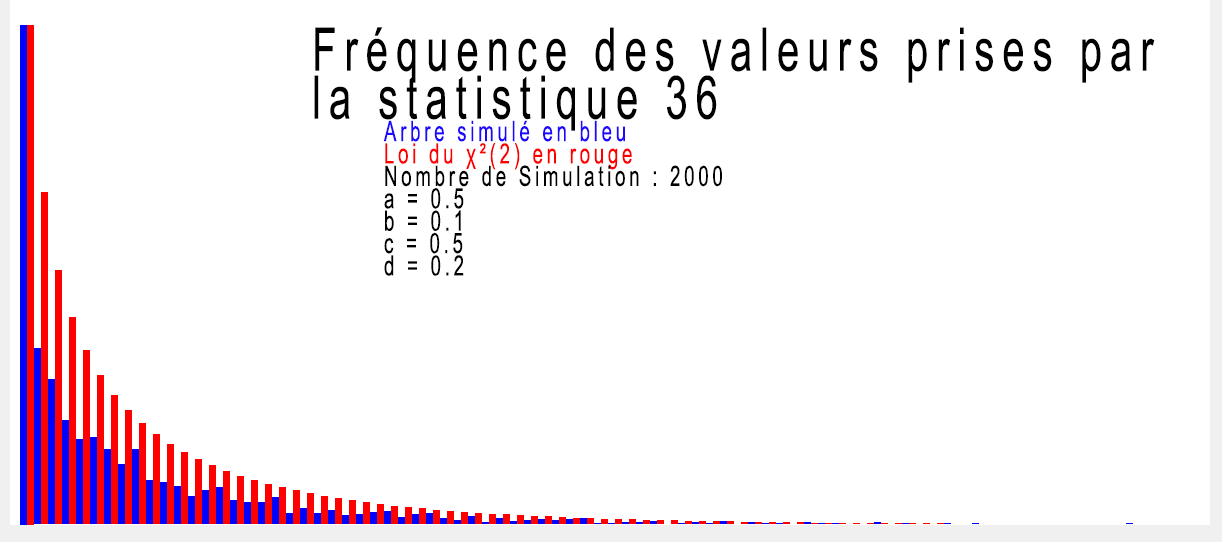
<style>
.page{position:relative;width:1222px;height:542px;background:#ffffff}
.page>*{position:absolute;margin:0}
.t1{font:28px "ArialMT";letter-spacing:0.2em;color:#000000;scale:0.67 1}
.t2{font:60px "ArialMT";letter-spacing:0.2em;color:#010000;scale:0.67 1}
.t3{font:28px "ArialMT";letter-spacing:0.2em;color:#1e07fd;scale:0.67 1}
.t4{font:28px "ArialMT";letter-spacing:0.2em;color:#fc0000;scale:0.67 1}
</style>
<div class="page">
<p class="t1" style="left:314px;top:27px;width:841px;height:249px"><span class="t2">Fréquence des valeurs prises par la statistique 36<br>  </span><span class="t3">Arbre simulé en bleu<br>  </span><span class="t4">Loi du χ²(2) en rouge<br>  </span>Nombre de Simulation : 2000<br>  a = 0.5<br>  b = 0.1<br>  c = 0.5<br>  d = 0.2</p>
</div>
